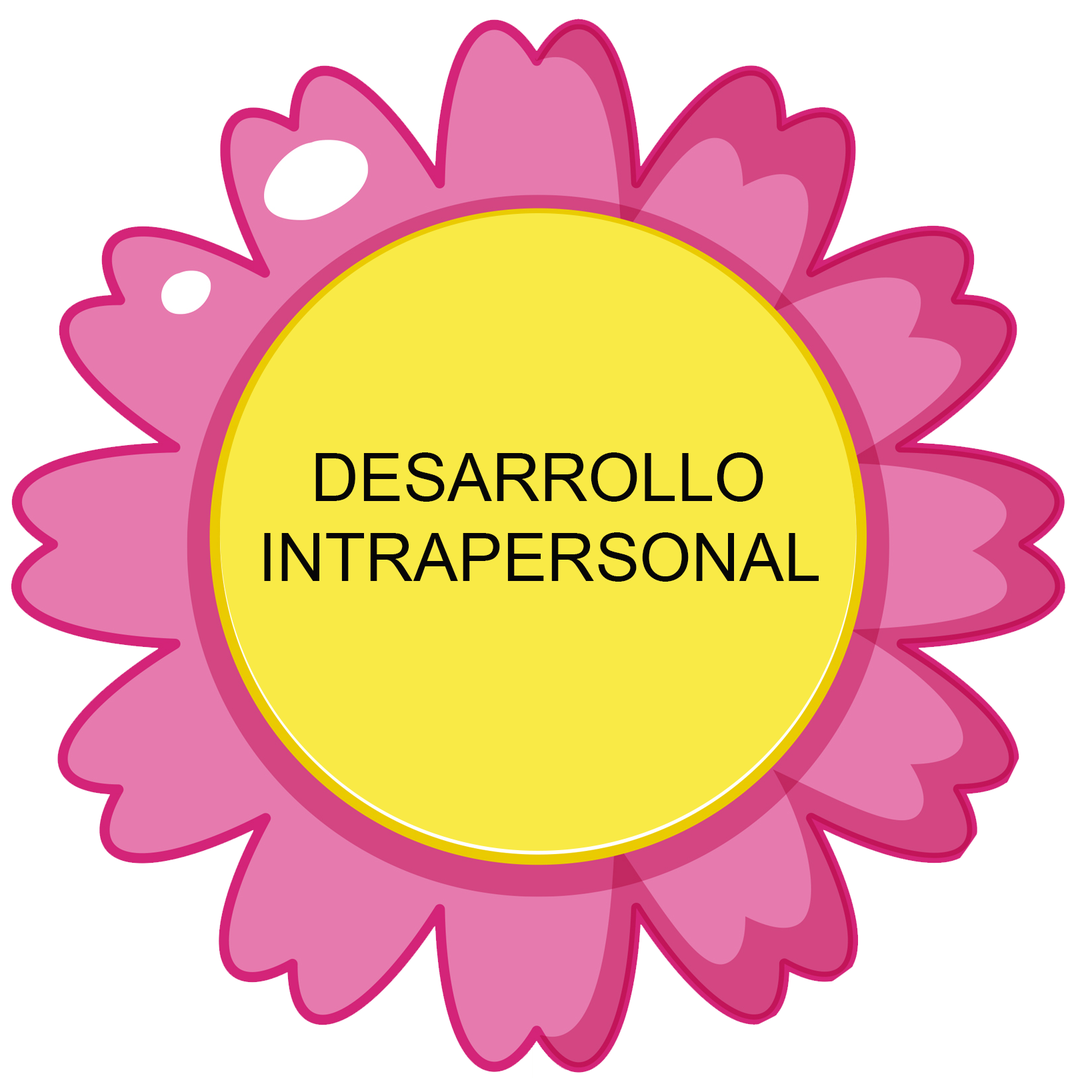
<style>
.page{position:relative;width:1092px;height:1092px;background:#ffffff}
.page>*{position:absolute;margin:0}
.t1{font:66.6px "ArialMT";color:#060606}
</style>
<div class="page">
<p class="t1" style="left:264px;top:453px;width:554px;height:129px;text-align:center">DESARROLLO<br>INTRAPERSONAL</p>
</div>
